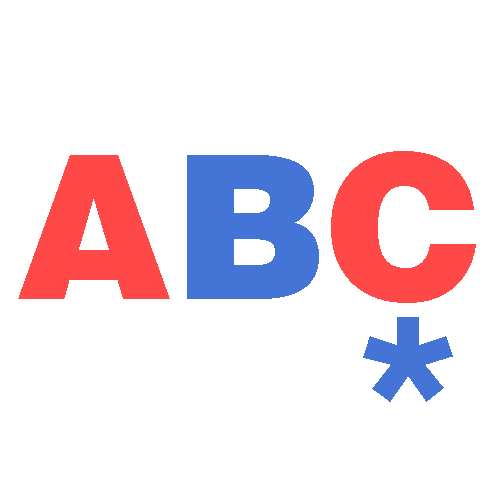
<style>
.page{position:relative;width:500px;height:500px;background:#ffffff}
.page>*{position:absolute;margin:0}
.t1{font:200px "HelveticaBlack";color:#ff4949}
.t2{font:200px "HelveticaBlack";color:#4474d6}
</style>
<div class="page">
<p class="t1" style="left:18px;top:151px;width:458px;height:152px">A<span class="t2">B</span>C</p>
<p class="t2" style="left:363px;top:317px;width:90px;height:85px">*</p>
</div>
